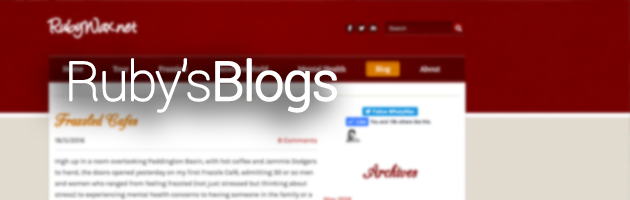
<style>
.page{position:relative;width:630px;height:200px}
.page>*{position:absolute;margin:0}
.t1{font:54px "Roboto-Thin";letter-spacing:-0.05em;color:#ffffff;font-weight:bold}
.t2{font:54px "Roboto-Light";letter-spacing:-0.05em;color:#ffffff;font-weight:bold}
</style>
<div class="page">
<p class="t1" style="left:69px;top:58px;width:268px;height:55px">Ruby’s<span class="t2">Blogs</span></p>
</div>
